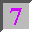
<style>
.page{position:relative;width:32px;height:32px;background:#bbbbbb}
.page>*{position:absolute;margin:0}
.t1{font:25px "TimesNewRomanPS-BoldMT";color:#d200ff}
</style>
<div class="page">
<p class="t1" style="left:10px;top:8px;width:12px;height:17px">7</p>
</div>
